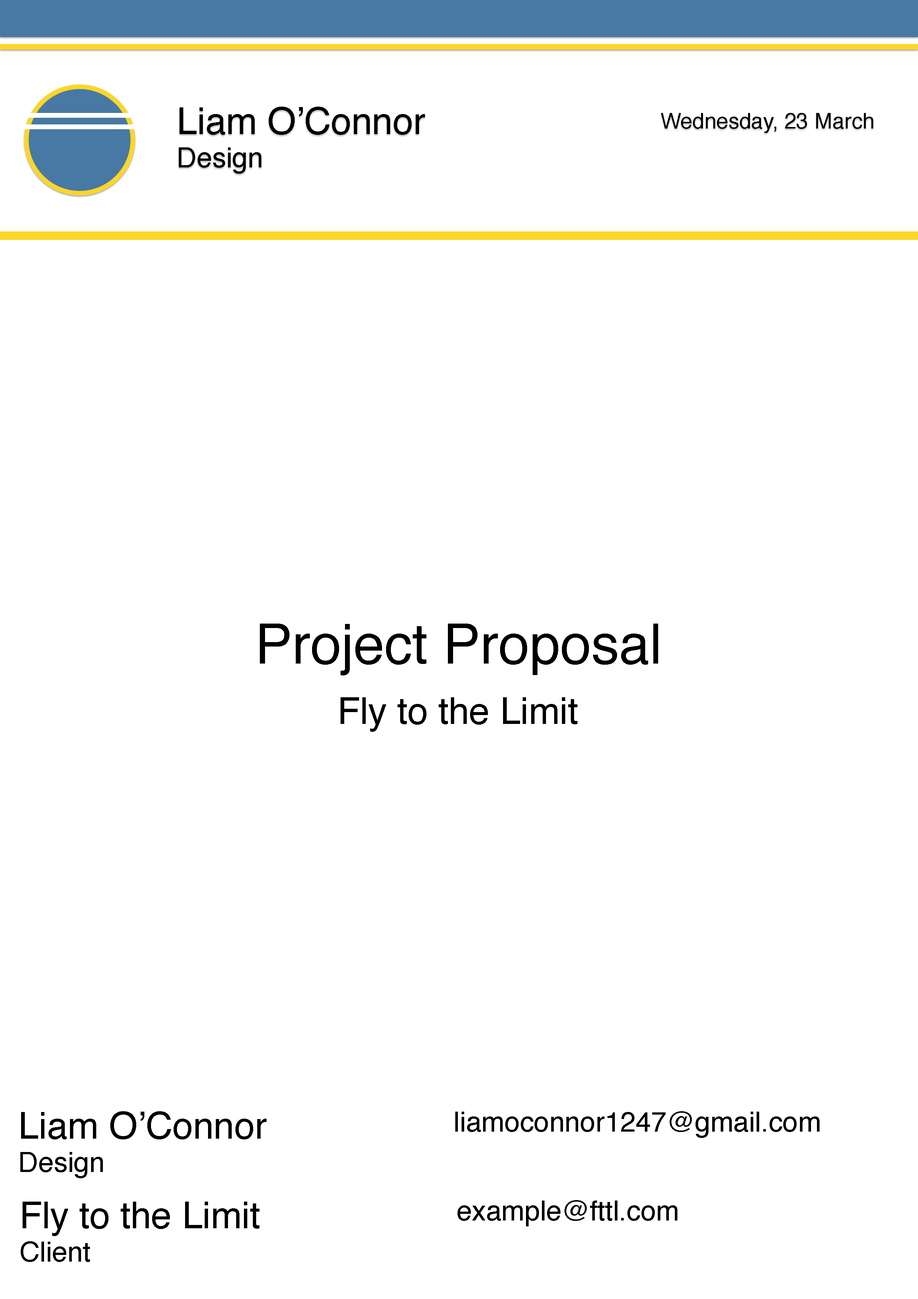
<style>
.page{position:relative;width:918px;height:1299px;background:#ffffff}
.page>*{position:absolute;margin:0}
.t1{font:55.5px "Helvetica";color:#000000}
.t2{font:37px "Helvetica";color:#000000}
.t3{font:27.8px "Helvetica";color:#000000}
</style>
<div class="page">
<p class="t1" style="left:260px;top:623px;width:398px;height:52px">Project Proposal</p>
<p class="t2" style="left:341px;top:697px;width:237px;height:35px">Fly to the Limit</p>
<p class="t2" style="left:20px;top:1111px;width:247px;height:67px">Liam O’Connor<br><span class="t3">Design</span></p>
<p class="t3" style="left:455px;top:1111px;width:365px;height:27px">liamoconnor1247@gmail.com</p>
<p class="t2" style="left:21px;top:1201px;width:239px;height:61px">Fly to the Limit<br><span class="t3">Client</span></p>
<p class="t3" style="left:458px;top:1200px;width:220px;height:26px">example@fttl.com</p>
</div>
